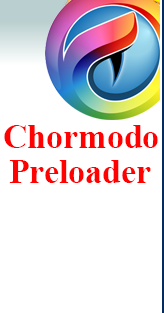
<style>
.page{position:relative;width:164px;height:313px;background:#ffffff}
.page>*{position:absolute;margin:0}
.t1{font:34px "TimesNewRomanPS-BoldMT";color:#ff0101}
</style>
<div class="page">
<p class="t1" style="left:4px;top:125px;width:154px;height:23px">Chormodo</p>
<p class="t1" style="left:9px;top:160px;width:142px;height:23px">Preloader</p>
</div>
